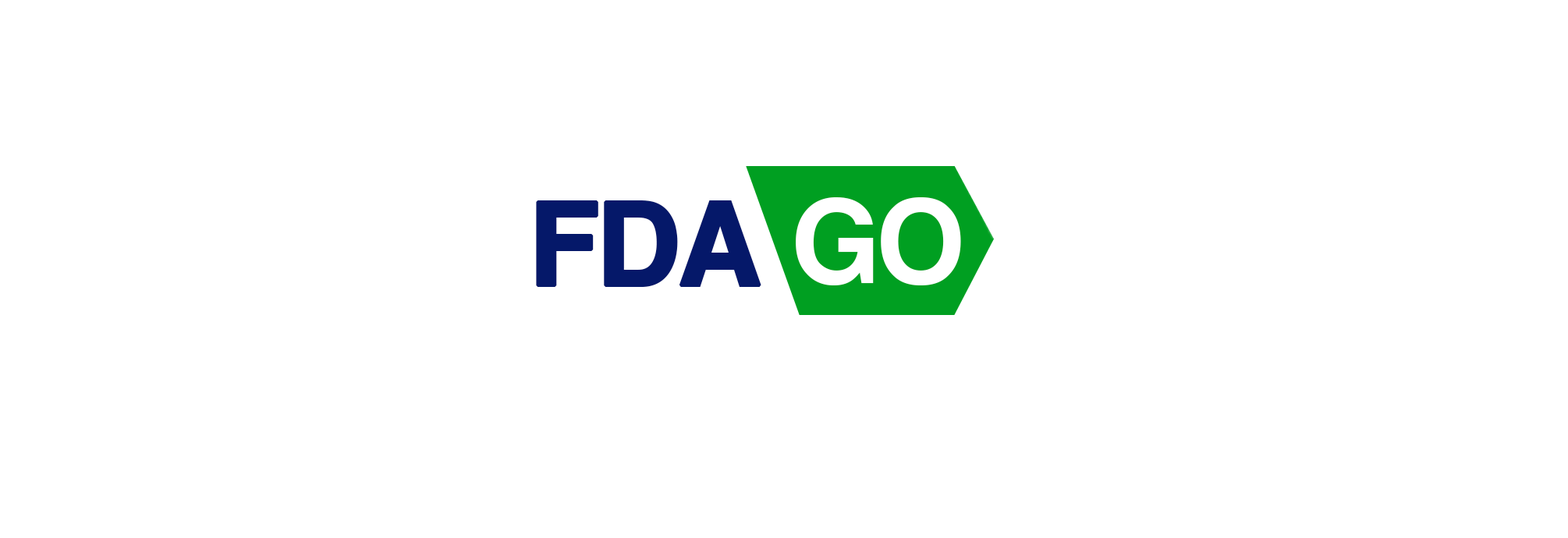
<style>
.page{position:relative;width:1568px;height:538px;background:#ffffff}
.page>*{position:absolute;margin:0}
.t1{font:115.5px "Helvetica-Bold";letter-spacing:-0.05em;color:#ffffff;text-transform:uppercase}
.t2{font:115.5px "Helvetica-Bold";letter-spacing:-0.05em;color:#051869;font-weight:bold}
</style>
<div class="page">
<p class="t1" style="left:796px;top:197px;width:165px;height:89px">go</p>
<p class="t2" style="left:536px;top:200px;width:225px;height:87px">FDA</p>
</div>
